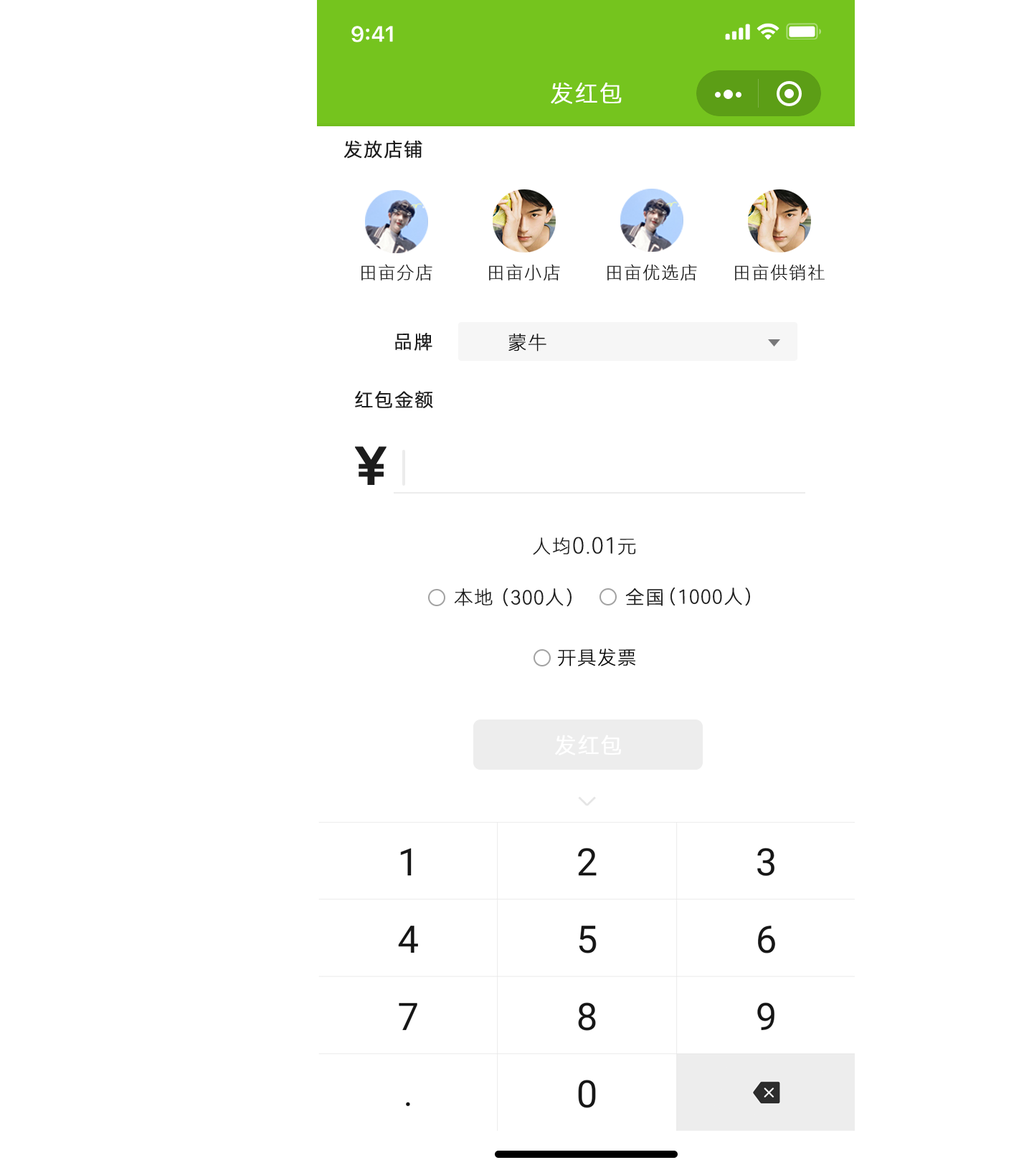
<style>
.page{position:relative;width:1024px;height:1165px;background:#ffffff}
.page>*{position:absolute;margin:0}
.t1{font:22.9px "HarmonyOS_Sans_SC_Light";letter-spacing:0.04em;color:#ffffff;text-transform:uppercase;font-weight:bold}
.t2{font:18.6px "HarmonyOS_Sans_SC_Light";letter-spacing:0.04em;color:#1c1c1c;text-transform:uppercase;font-weight:bold}
.t3{font:17.2px "HarmonyOS_Sans_SC_Thin";letter-spacing:0.04em;color:#1c1c1c;text-transform:uppercase;font-weight:bold}
.t4{font:18.6px "HarmonyOS_Sans_SC_Thin";letter-spacing:0.04em;color:#111111;text-transform:uppercase;font-weight:bold}
.t5{font:51.5px "HarmonyOS_Sans_SC_Medium";letter-spacing:0.04em;color:#1c1c1c;text-transform:uppercase;font-weight:bold}
.t6{font:21.5px "HarmonyOS_Sans_SC_Thin";letter-spacing:0.04em;color:#1c1c1c;text-transform:uppercase;font-weight:bold}
.t7{font:18.6px "HarmonyOS_Sans_SC_Thin";letter-spacing:0.04em;color:#1c1c1c;text-transform:uppercase;font-weight:bold}
.t8{font:18.6px "HarmonyOS_Sans_SC_Thin";letter-spacing:0.04em;color:#000000;text-transform:uppercase;font-weight:bold}
.t9{font:21.5px "HarmonyOS_Sans_SC_Light";letter-spacing:0.04em;color:#ffffff;text-transform:uppercase;font-weight:bold}
</style>
<div class="page">
<p class="t1" style="left:551px;top:82px;width:71px;height:22px">发红包</p>
<p class="t2" style="left:344px;top:141px;width:78px;height:17px">发放店铺</p>
<p class="t3" style="left:361px;top:264px;width:71px;height:17px">田亩分店</p>
<p class="t3" style="left:489px;top:264px;width:71px;height:17px">田亩小店</p>
<p class="t3" style="left:607px;top:264px;width:90px;height:17px">田亩优选店</p>
<p class="t3" style="left:735px;top:264px;width:90px;height:16px">田亩供销社</p>
<p class="t2" style="left:395px;top:333px;width:37px;height:18px">品牌</p>
<p class="t4" style="left:508px;top:333px;width:38px;height:18px">蒙牛</p>
<p class="t2" style="left:355px;top:390px;width:78px;height:18px">红包金额</p>
<p class="t5" style="left:355px;top:446px;width:31px;height:39px">￥</p>
<p class="t6" style="left:533px;top:536px;width:103px;height:19px"><span class="t7">人均</span>0.01<span class="t7">元</span></p>
<p class="t7" style="left:455px;top:588px;width:38px;height:18px">本地</p>
<p class="t7" style="left:503px;top:588px;width:69px;height:19px">（300人）</p>
<p class="t7" style="left:625px;top:588px;width:38px;height:18px">全国</p>
<p class="t7" style="left:670px;top:587px;width:80px;height:19px">（1000人）</p>
<p class="t8" style="left:557px;top:648px;width:78px;height:18px">开具发票</p>
<p class="t9" style="left:555px;top:734px;width:67px;height:21px">发红包</p>
</div>
